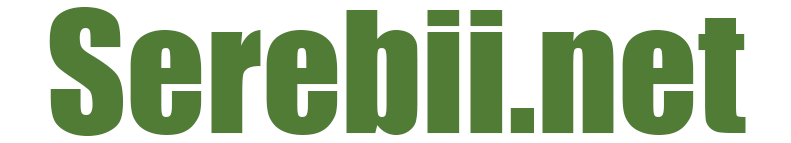
<style>
.page{position:relative;width:791px;height:143px;background:#ffffff}
.page>*{position:absolute;margin:0}
.t1{font:155.9px "Impact";color:#507c36}
</style>
<div class="page">
<p class="t1" style="left:49px;top:7px;width:697px;height:129px">Serebii.net</p>
</div>
